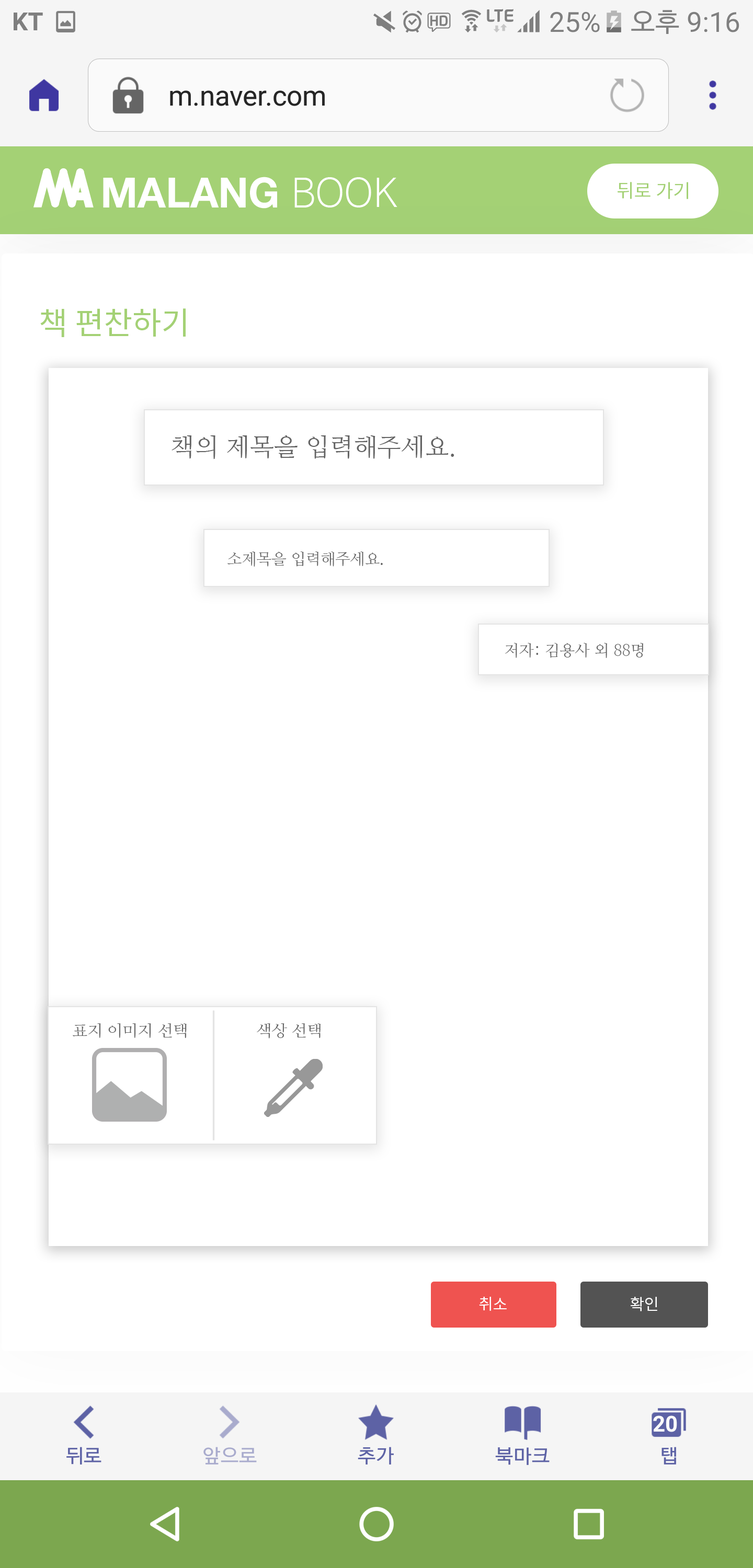
<style>
.page{position:relative;width:753px;height:1568px;background:#ffffff}
.page>*{position:absolute;margin:0}
.t1{font:18.8px "NotoSansCJKkr-Regular";color:#a4d175}
.t2{font:31.4px "NotoSansCJKkr-Regular";color:#a4d175}
.t3{font:25.1px "NanumMyeongjo";color:#646464}
.t4{font:15.7px "NanumMyeongjo";color:#646464}
.t5{font:16.1px "NanumMyeongjo";color:#646464}
.t6{font:15.7px "NotoSansCJKkr-Regular";color:#ffffff}
</style>
<div class="page">
<p class="t1" style="left:617px;top:182px;width:71px;height:17px">뒤로 가기</p>
<p class="t2" style="left:40px;top:308px;width:146px;height:29px">책 편찬하기</p>
<p class="t3" style="left:171px;top:435px;width:283px;height:24px">책의 제목을 입력해주세요.</p>
<p class="t4" style="left:227px;top:551px;width:156px;height:16px">소제목을 입력해주세요.</p>
<p class="t4" style="left:505px;top:643px;width:138px;height:15px">저자: 김용사 외 88명</p>
<p class="t5" style="left:73px;top:1023px;width:114px;height:15px">표지 이미지 선택</p>
<p class="t5" style="left:257px;top:1023px;width:63px;height:16px">색상 선택</p>
<p class="t6" style="left:479px;top:1297px;width:27px;height:14px">취소</p>
<p class="t6" style="left:630px;top:1297px;width:27px;height:14px">확인</p>
</div>
